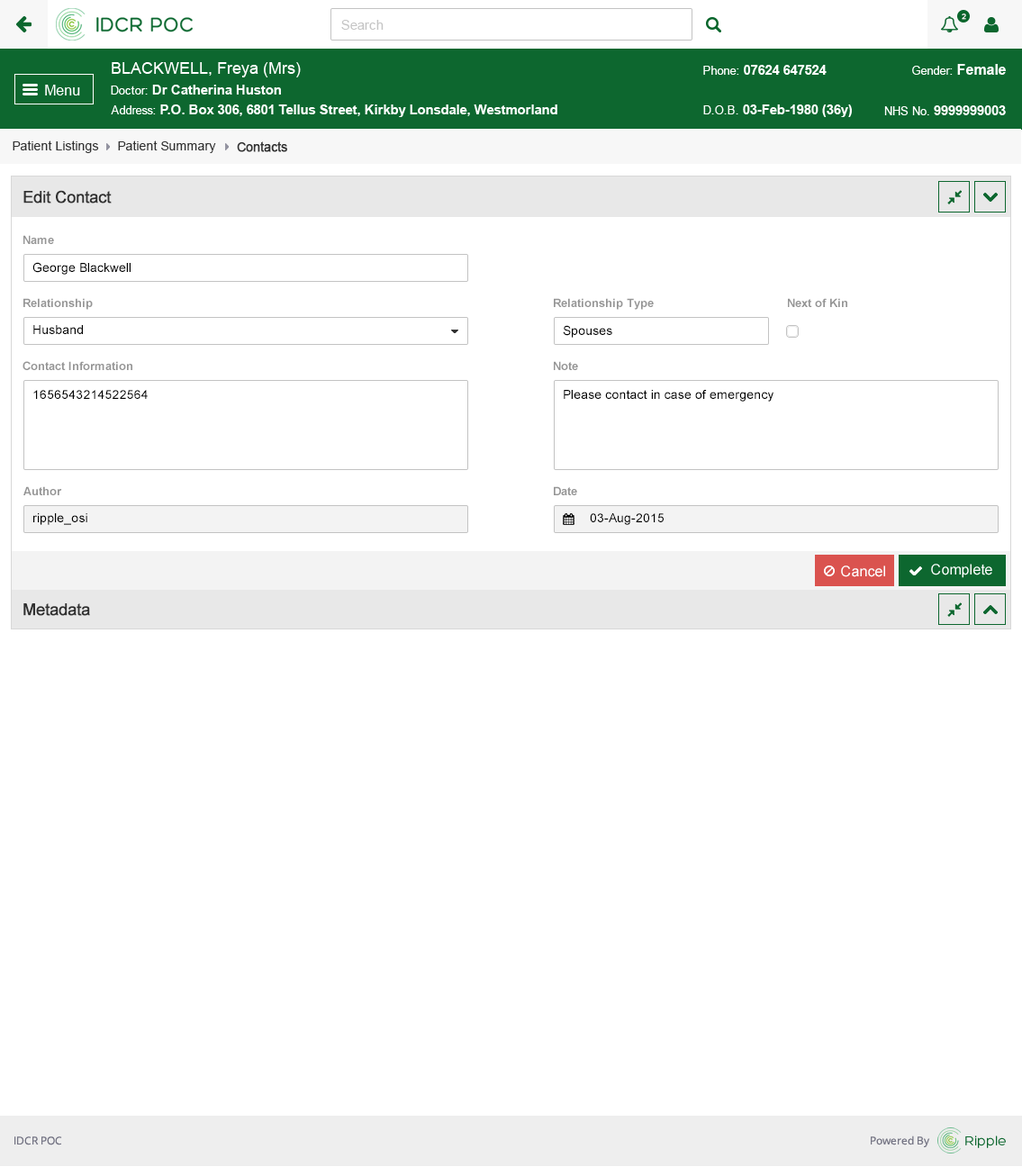
<style>
.page{position:relative;width:1022px;height:1167px;background:#ffffff}
.page>*{position:absolute;margin:0}
.t1{font:12.6px "ArialMT";color:#313131}
.t2{font:12.6px "ArialMT";color:#313131;font-weight:bold}
.t3{font:16.2px "ArialMT";color:#303030;font-weight:bold}
.t4{font:11.7px "Arial-BoldMT";color:#959595}
.t5{font:12.6px "ArialMT";color:#000000}
</style>
<div class="page">
<p class="t1" style="left:13px;top:140px;width:86px;height:13px">Patient Listings</p>
<p class="t1" style="left:118px;top:140px;width:98px;height:13px">Patient Summary</p>
<p class="t2" style="left:237px;top:141px;width:50px;height:11px">Contacts</p>
<p class="t3" style="left:23px;top:190px;width:89px;height:13px">Edit Contact</p>
<p class="t4" style="left:23px;top:235px;width:31px;height:9px">Name</p>
<p class="t5" style="left:32px;top:262px;width:99px;height:13px">George Blackwell</p>
<p class="t4" style="left:23px;top:298px;width:70px;height:12px">Relationship</p>
<p class="t4" style="left:554px;top:298px;width:100px;height:12px">Relationship Type</p>
<p class="t4" style="left:788px;top:298px;width:59px;height:9px">Next of Kin</p>
<p class="t5" style="left:33px;top:325px;width:50px;height:9px">Husband</p>
<p class="t5" style="left:563px;top:325px;width:49px;height:13px">Spouses</p>
<p class="t4" style="left:23px;top:361px;width:109px;height:9px">Contact Information</p>
<p class="t4" style="left:554px;top:361px;width:24px;height:9px">Note</p>
<p class="t5" style="left:33px;top:390px;width:115px;height:9px">1656543214522564</p>
<p class="t5" style="left:564px;top:390px;width:209px;height:12px">Please contact in case of emergency</p>
<p class="t4" style="left:23px;top:486px;width:39px;height:9px">Author</p>
<p class="t4" style="left:554px;top:486px;width:23px;height:9px">Date</p>
<p class="t5" style="left:33px;top:513px;width:54px;height:12px">ripple_osi</p>
<p class="t5" style="left:590px;top:513px;width:74px;height:12px">03-Aug-2015</p>
<p class="t3" style="left:23px;top:603px;width:67px;height:13px">Metadata</p>
</div>
